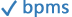
<style>
.page{position:relative;width:72px;height:17px;background:#ffffff}
.page>*{position:absolute;margin:0}
.t1{font:17px "MicrosoftYaHei";color:#337ab7;font-weight:bold}
</style>
<div class="page">
<p class="t1" style="left:23px;top:0px;width:46px;height:18px">bpms</p>
</div>
